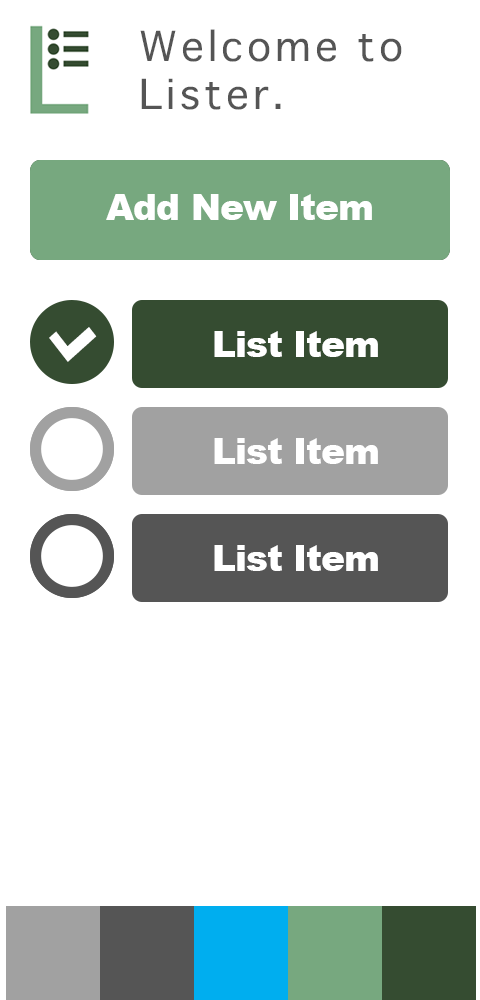
<style>
.page{position:relative;width:480px;height:1000px;background:#ffffff}
.page>*{position:absolute;margin:0}
.t1{font:40px/48px "Osaka";letter-spacing:0.1em;color:#555555}
.t2{font:36px "Arial-Black";letter-spacing:-0.025em;color:#ffffff}
.t3{font:53.3px "Arial-Black";letter-spacing:-0.025em;color:#ffffff}
</style>
<div class="page">
<p class="t1" style="left:140px;top:29px;width:262px;height:81px">Welcome to Lister.</p>
<p class="t2" style="left:106px;top:194px;width:266px;height:26px">Add New Item</p>
<p class="t2" style="left:106px;top:194px;width:266px;height:26px">Add New Item</p>
<p class="t3" style="left:49px;top:327px;width:48px;height:35px;rotate:-128deg">L</p>
<p class="t2" style="left:214px;top:331px;width:164px;height:26px">List Item</p>
<p class="t2" style="left:214px;top:438px;width:164px;height:26px">List Item</p>
<p class="t2" style="left:214px;top:545px;width:164px;height:26px">List Item</p>
</div>
